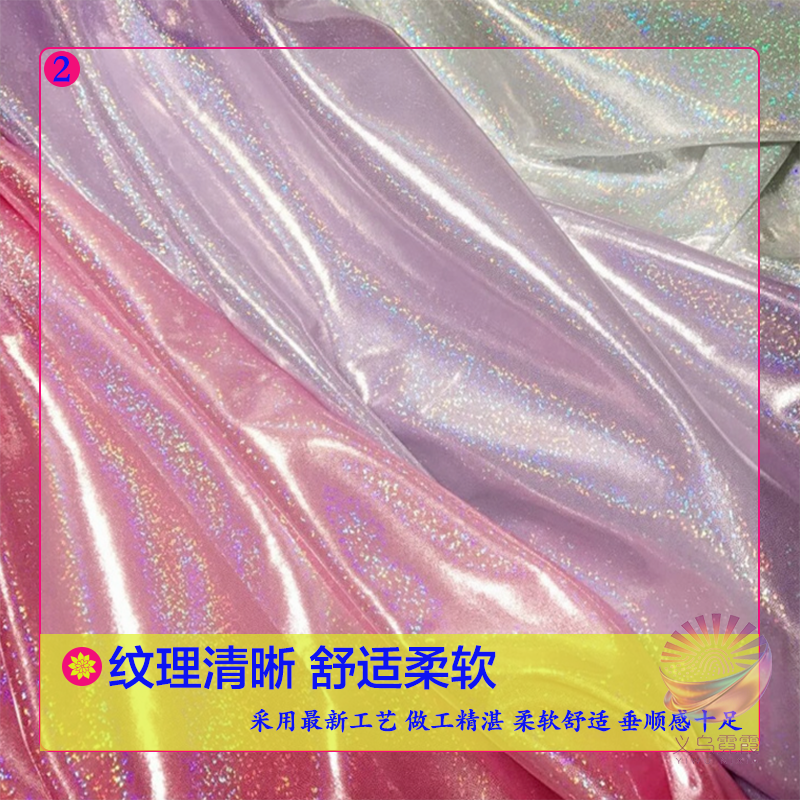
<style>
.page{position:relative;width:800px;height:800px}
.page>*{position:absolute;margin:0}
.t1{font:40px "STKaitiSC-Black";color:#0d13f3}
.t2{font:47px "FZLTZHK--GBK1-0";color:#0d13f3}
.t3{font:25px "STKaitiSC-Black";color:#0d13f3}
</style>
<div class="page">
<p class="t1" style="left:53px;top:56px;width:17px;height:26px">2</p>
<p class="t2" style="left:109px;top:645px;width:388px;height:45px">纹理清晰 舒适柔软</p>
<p class="t3" style="left:249px;top:709px;width:494px;height:24px">采用最新工艺 做工精湛 柔软舒适 垂顺感十足</p>
</div>
